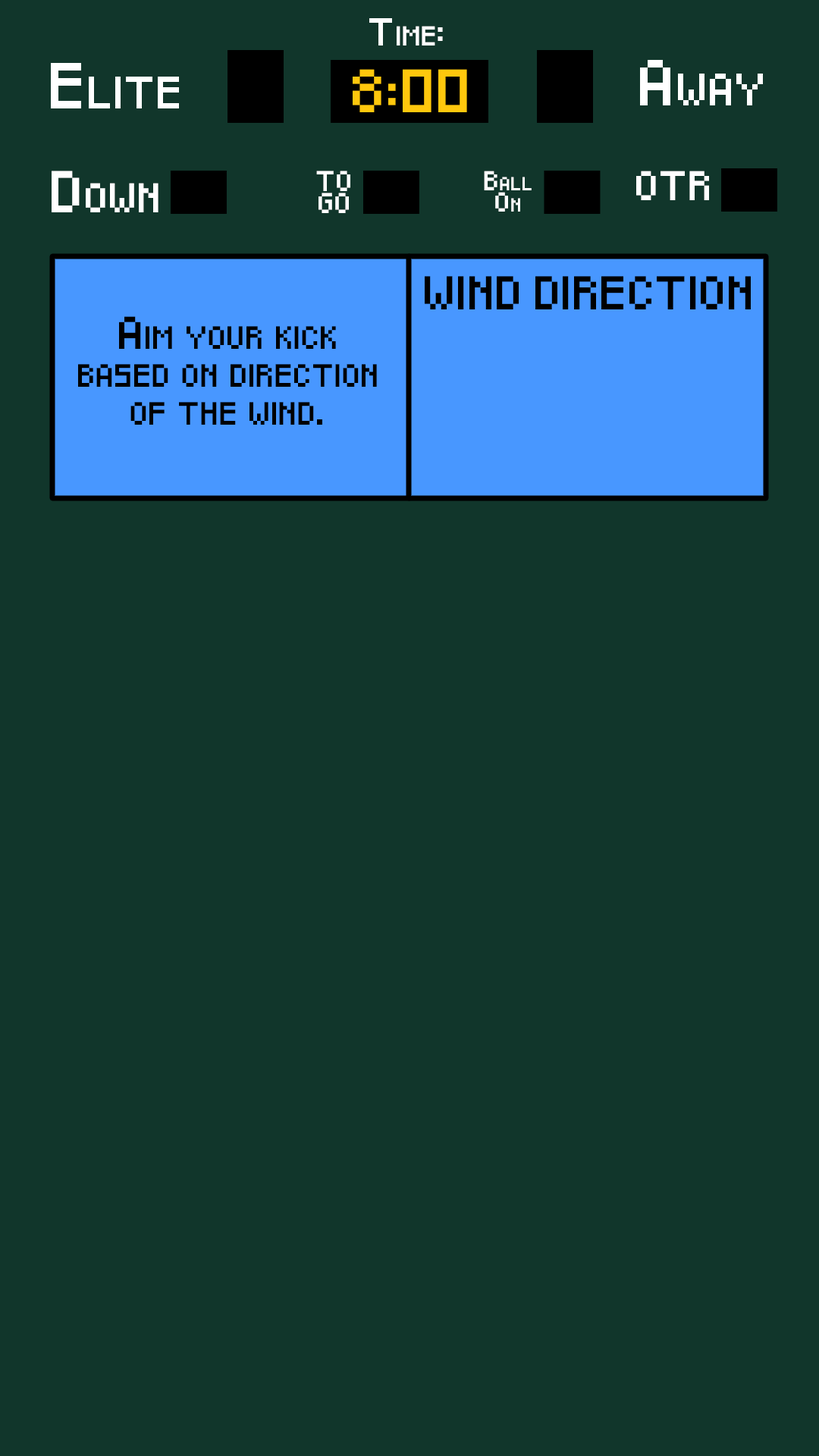
<style>
.page{position:relative;width:819px;height:1456px;background:#11362b}
.page>*{position:absolute;margin:0}
.t1{font:22.7px "Pixeled";color:#ffffff;font-variant:small-caps}
.t2{font:37.9px "Pixeled";color:#ffffff;font-variant:small-caps}
.t3{font:35.6px "Pixeled";color:#ffc80d;font-variant:small-caps}
.t4{font:34.5px "Pixeled";color:#ffffff;font-variant:small-caps}
.t5{font:16.7px/22.5px "Pixeled";color:#ffffff;font-variant:small-caps}
.t6{font:15.9px/21.4px "Pixeled";color:#ffffff;font-variant:small-caps}
.t7{font:24.2px "Pixeled";color:#ffffff;font-variant:small-caps}
.t8{font:27.6px "Pixeled";color:#000000;font-variant:small-caps}
.t9{font:26.8px/37.8px "Pixeled";color:#000000;font-variant:small-caps}
</style>
<div class="page">
<p class="t1" style="left:369px;top:18px;width:74px;height:27px">Time:</p>
<p class="t2" style="left:51px;top:63px;width:128px;height:45px">Elite</p>
<p class="t2" style="left:640px;top:60px;width:123px;height:45px">Away</p>
<p class="t3" style="left:353px;top:69px;width:114px;height:43px">8:00</p>
<p class="t4" style="left:52px;top:171px;width:106px;height:41px">Down</p>
<p class="t5" style="left:316px;top:171px;width:34px;height:42px;text-align:center">TO<br>GO</p>
<p class="t6" style="left:484px;top:171px;width:48px;height:41px;text-align:center">Ball<br>On</p>
<p class="t7" style="left:636px;top:171px;width:73px;height:29px">OTR</p>
<p class="t8" style="left:425px;top:276px;width:326px;height:33px">WIND DIRECTION</p>
<p class="t9" style="left:78px;top:316px;width:299px;height:109px;text-align:center">Aim your kick based on direction of the wind.</p>
</div>
